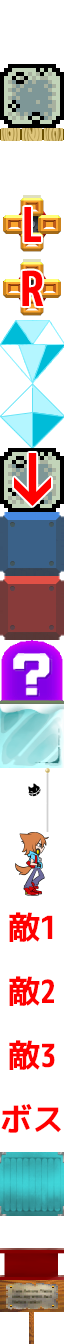
<style>
.page{position:relative;width:64px;height:1344px;background:#ffffff}
.page>*{position:absolute;margin:0}
.t1{font:48px "mplus-1m-bold";color:#ff0000}
.t2{font:32px "mplus-1m-bold";color:#ff0000}
</style>
<div class="page">
<p class="t1" style="left:24px;top:207px;width:17px;height:35px">L</p>
<p class="t1" style="left:22px;top:270px;width:22px;height:36px">R</p>
<p class="t2" style="left:9px;top:912px;width:44px;height:30px">敵1</p>
<p class="t2" style="left:9px;top:976px;width:45px;height:30px">敵2</p>
<p class="t2" style="left:9px;top:1040px;width:46px;height:30px">敵3</p>
<p class="t2" style="left:1px;top:1103px;width:60px;height:30px">ボス</p>
</div>
